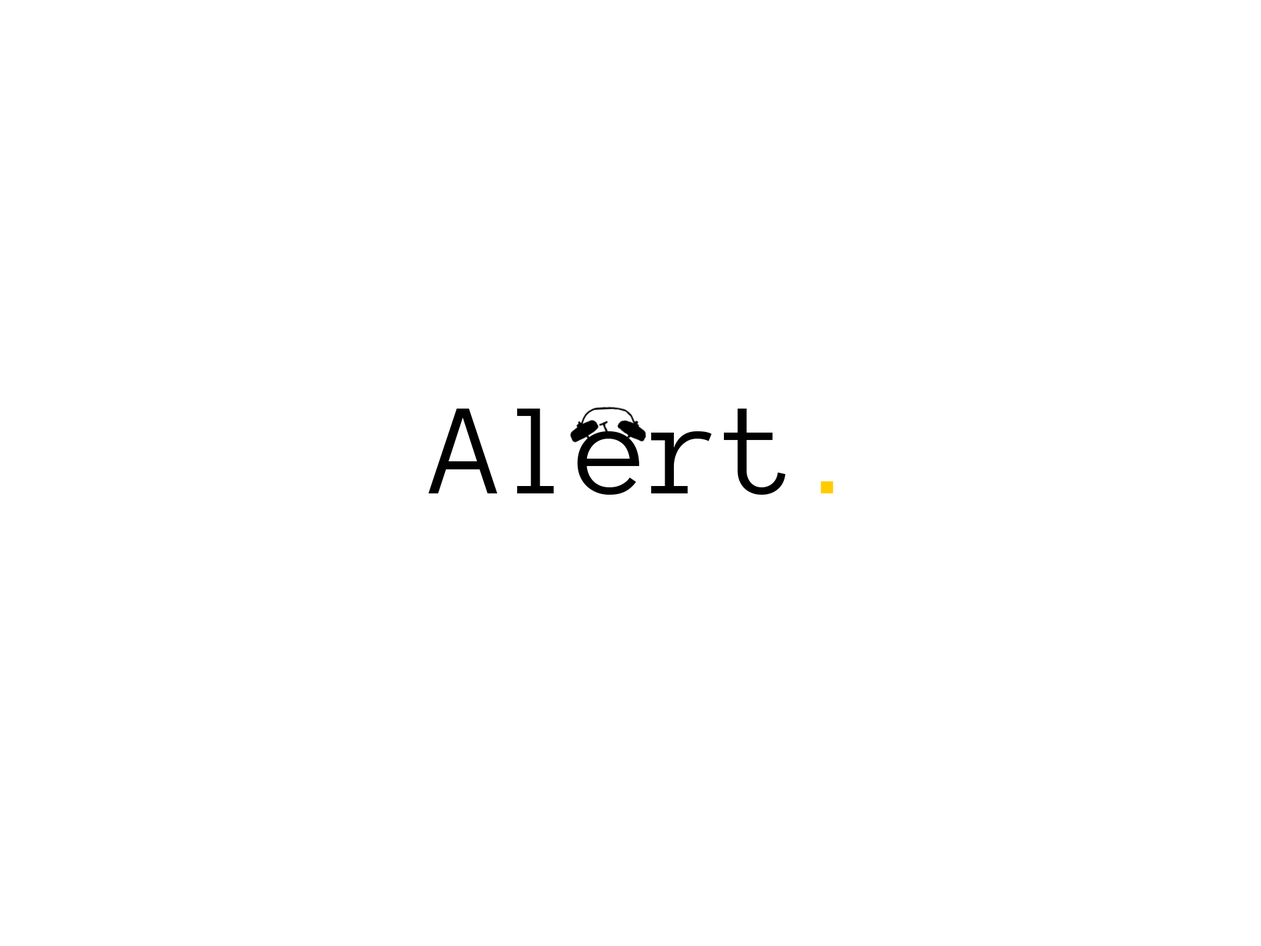
<style>
.page{position:relative;width:1261px;height:946px;background:#ffffff}
.page>*{position:absolute;margin:0}
.t1{font:133.5px "AnonymousPro-Regular";color:#000000}
.t2{font:133.5px "AnonymousPro-Regular";color:#ffcc00}
</style>
<div class="page">
<p class="t1" style="left:428px;top:408px;width:405px;height:86px">Alert<span class="t2">.</span></p>
</div>
